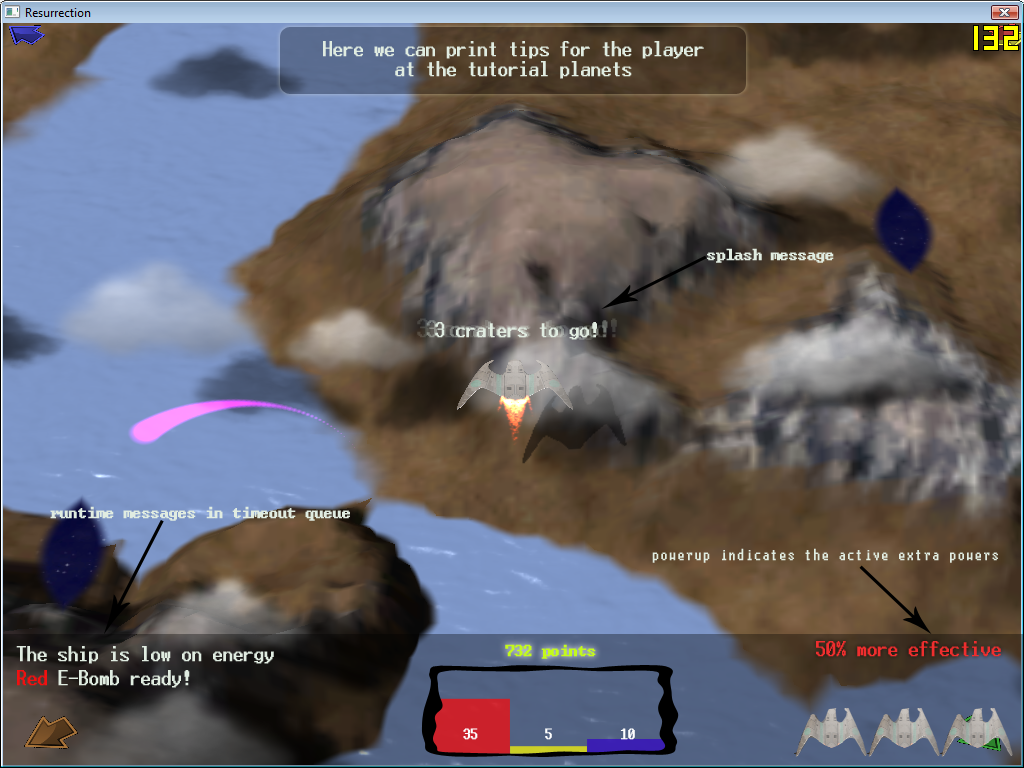
<style>
.page{position:relative;width:1024px;height:768px}
.page>*{position:absolute;margin:0}
.t1{font:17px "Terminal";letter-spacing:-0.02em;color:#e0ece1;font-weight:bold}
.t2{font:15px "Terminal";letter-spacing:-0.02em;color:#e0ece1;font-weight:bold}
.t3{font:19px "Terminal";letter-spacing:-0.02em;font-weight:bold}
.t4{font:14px "Terminal";letter-spacing:-0.02em;color:#e0ece1;font-weight:bold}
.t5{font:17px "Terminal";letter-spacing:-0.02em;color:#ef2e2e;font-weight:bold}
.t6{font:15px "Terminal";letter-spacing:-0.02em;color:#c3fa1b;font-weight:bold}
.t7{font:17px "Terminal";letter-spacing:-0.02em;color:#f11010;font-weight:bold}
.t8{font:12px "Terminal";letter-spacing:-0.02em;color:#fefefe;font-weight:bold}
</style>
<div class="page">
<p class="t1" style="left:323px;top:41px;width:381px;height:38px;text-align:center">Here we can print tips for the player<br>at the tutorial planets</p>
<p class="t2" style="left:707px;top:248px;width:127px;height:15px">splash message</p>
<p class="t3" style="left:426px;top:320px;width:182px;height:20px">3 craters to go!</p>
<p class="t1" style="left:435px;top:322px;width:162px;height:18px">3 craters to go!</p>
<p class="t2" style="left:50px;top:506px;width:300px;height:15px">runtime messages in timeout queue</p>
<p class="t4" style="left:652px;top:548px;width:346px;height:15px">powerup indicates the active extra powers</p>
<p class="t5" style="left:816px;top:641px;width:185px;height:16px">50% more effective</p>
<p class="t1" style="left:16px;top:646px;width:258px;height:18px">The ship is low on energy</p>
<p class="t6" style="left:505px;top:644px;width:91px;height:15px">732 points</p>
<p class="t1" style="left:17px;top:670px;width:173px;height:18px"><span class="t7">Red </span>E-Bomb ready!</p>
<p class="t8" style="left:463px;top:728px;width:15px;height:12px">35</p>
<p class="t8" style="left:545px;top:728px;width:7px;height:12px">5</p>
<p class="t8" style="left:620px;top:728px;width:15px;height:12px">10</p>
</div>
